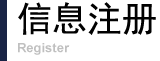
<style>
.page{position:relative;width:160px;height:61px;background:#ffffff}
.page>*{position:absolute;margin:0}
.t1{font:35px "SimHei";color:#010101}
.t2{font:13px "Arial-BoldMT";color:#c0c0c0}
</style>
<div class="page">
<p class="t1" style="left:18px;top:2px;width:138px;height:33px">信息注册</p>
<p class="t2" style="left:18px;top:43px;width:52px;height:12px">Register</p>
</div>
